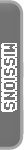
<style>
.page{position:relative;width:24px;height:150px;background:#727272}
.page>*{position:absolute;margin:0}
.t1{font:15.5px "KarmaticArcade";color:#ffffff;scale:0.71 1}
</style>
<div class="page">
<p class="t1" style="left:1px;top:43px;width:16px;height:69px;rotate:90deg">Missions</p>
</div>
